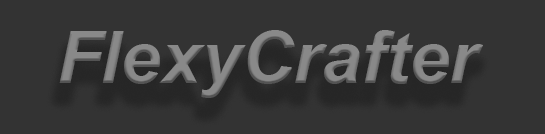
<style>
.page{position:relative;width:545px;height:134px;background:#333333}
.page>*{position:absolute;margin:0}
.t1{font:72px "Arial-BoldItalicMT";color:#898989}
</style>
<div class="page">
<p class="t1" style="left:59px;top:30px;width:424px;height:68px">FlexyCrafter</p>
</div>
